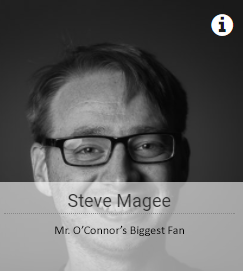
<style>
.page{position:relative;width:243px;height:271px}
.page>*{position:absolute;margin:0}
.t1{font:12px "Calibri";color:#000000}
</style>
<div class="page">
<p class="t1" style="left:55px;top:225px;width:129px;height:11px">Mr. O’Connor’s Biggest Fan</p>
</div>
